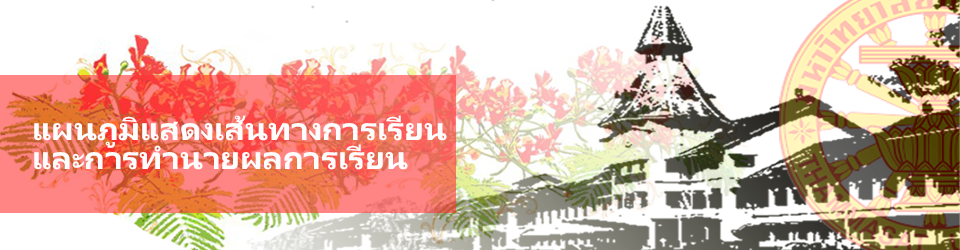
<style>
.page{position:relative;width:960px;height:250px;background:#ffffff}
.page>*{position:absolute;margin:0}
.t1{font:32.9px "Leelawadee-Bold";color:#fdfdfd}
.t2{font:33px "Leelawadee-Bold";color:#fdfdfd}
</style>
<div class="page">
<p class="t1" style="left:34px;top:115px;width:413px;height:33px">แผนภูมิแสดงเส้นทางการเรียน</p>
<p class="t2" style="left:34px;top:144px;width:374px;height:26px">และการทำนายผลการเรียน</p>
</div>
